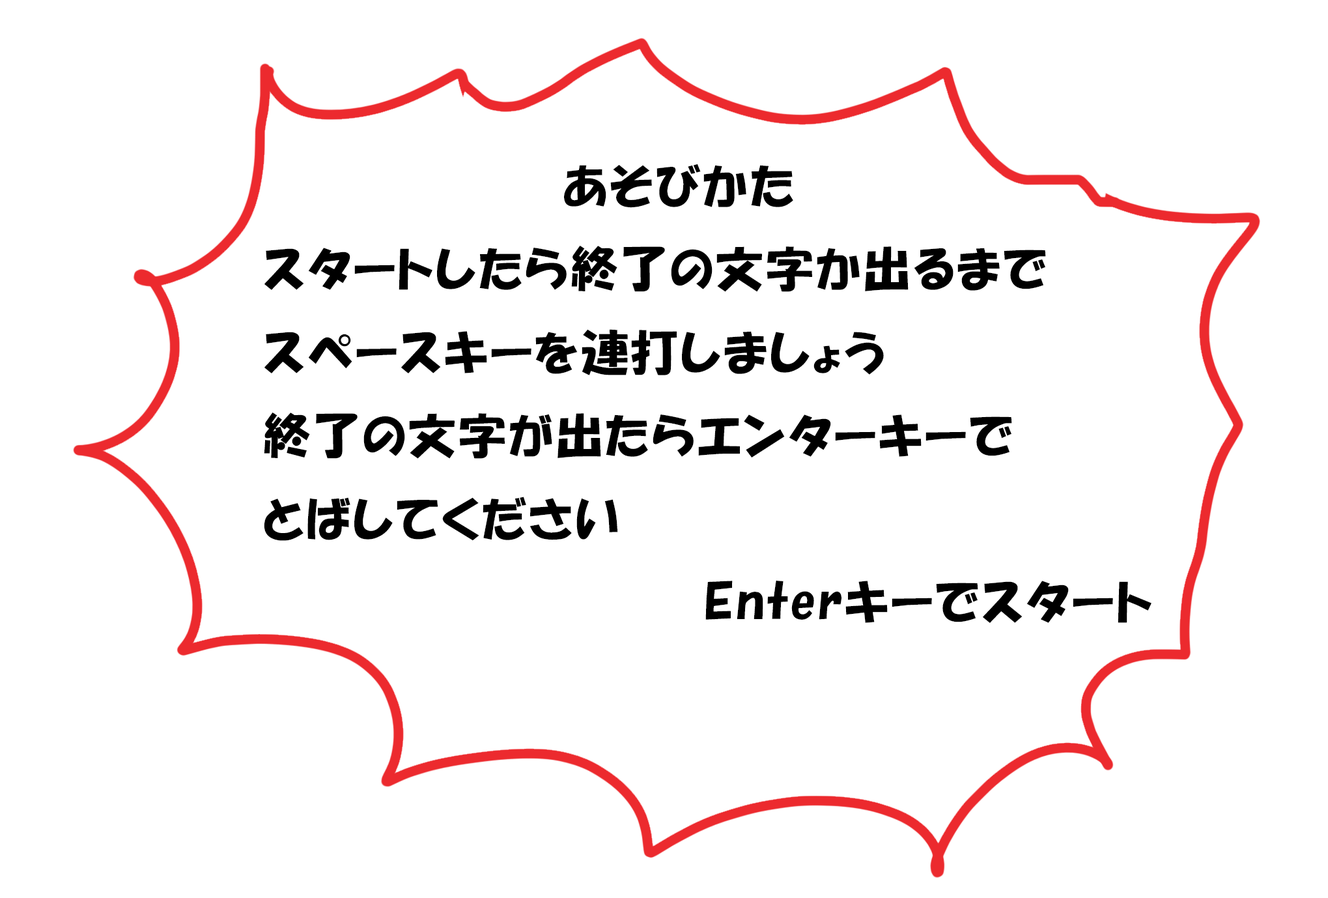
<style>
.page{position:relative;width:1328px;height:898px;background:#ffffff}
.page>*{position:absolute;margin:0}
.t1{font:47.6px "HGPSoeiKakupoptai";letter-spacing:0.05em;color:#000000}
</style>
<div class="page">
<p class="t1" style="left:564px;top:164px;width:229px;height:44px">あそびかた</p>
<p class="t1" style="left:264px;top:246px;width:888px;height:377px;text-align:justify">スタートしたら終了の文字か出るまで<br>スペースキーを連打しましょう<br>終了の文字が出たらエンターキーで<br>とばしてください<br>　　　　　　　　　　　　　Enterキーでスタート</p>
</div>
